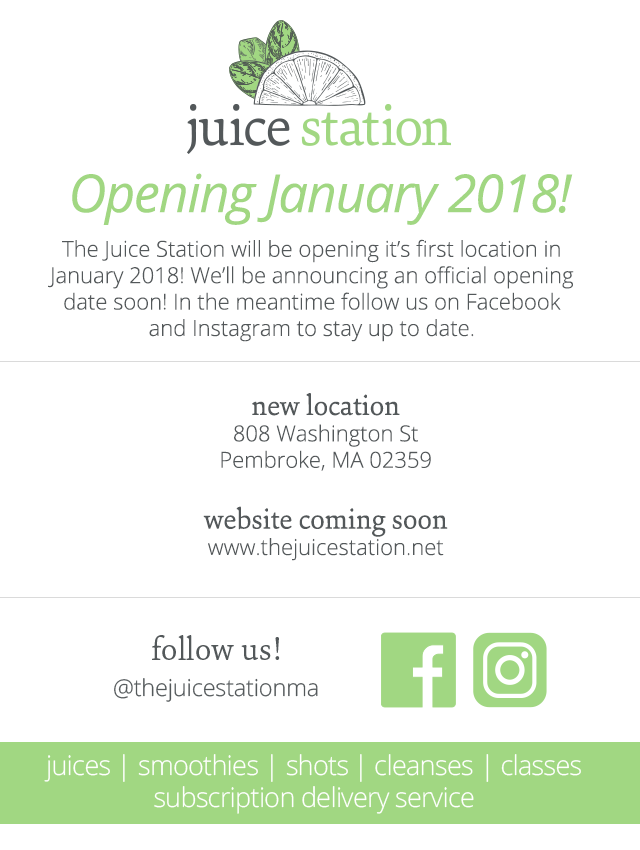
<style>
.page{position:relative;width:640px;height:850px;background:#ffffff}
.page>*{position:absolute;margin:0}
.t1{font:52.4px "OpenSans-Italic";letter-spacing:-0.025em;color:#a1d782}
.t2{font:22px "OpenSans-Light";color:#53585a}
.t3{font:30px "SinaNova-Regular";color:#53585a}
</style>
<div class="page">
<p class="t1" style="left:72px;top:173px;width:501px;height:52px">Opening January 2018!</p>
<p class="t2" style="left:48px;top:239px;width:526px;height:103px;text-align:center">The Juice Station will be opening it’s first location in January 2018! We’ll be announcing an official opening date soon! In the meantime follow us on Facebook and Instagram to stay up to date.</p>
<p class="t2" style="left:203px;top:393px;width:245px;height:168px;text-align:center"><span class="t3">new location<br></span>808 Washington St<br>Pembroke, MA 02359<br><span class="t3">website coming soon<br></span>www.thejuicestation.net</p>
</div>
